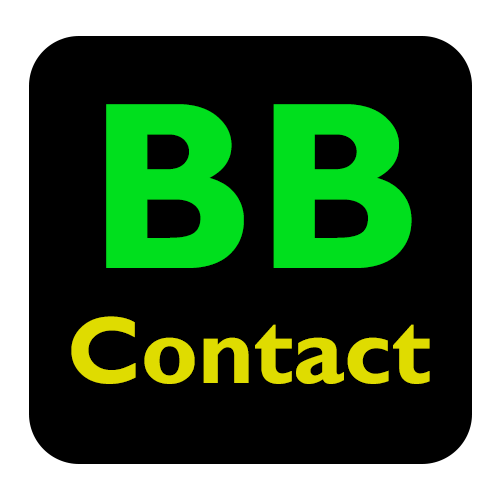
<style>
.page{position:relative;width:500px;height:500px;background:#000000}
.page>*{position:absolute;margin:0}
.t1{font:240px "GillSansMT-Bold";color:#00df1d}
.t2{font:96px "GillSansMT-Bold";color:#dfdc00}
</style>
<div class="page">
<p class="t1" style="left:106px;top:104px;width:306px;height:164px">BB</p>
<p class="t2" style="left:71px;top:316px;width:359px;height:68px">Contact</p>
</div>
